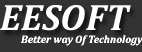
<style>
.page{position:relative;width:142px;height:52px;background:#333333}
.page>*{position:absolute;margin:0}
.t1{font:37.3px "Cambria-BoldItalic";color:#fefffe}
.t2{font:10.7px "Cambria-BoldItalic";color:#fefffe}
</style>
<div class="page">
<p class="t1" style="left:0px;top:5px;width:131px;height:26px">EESOFT</p>
<p class="t2" style="left:21px;top:35px;width:122px;height:11px">Better way Of Technology</p>
</div>
